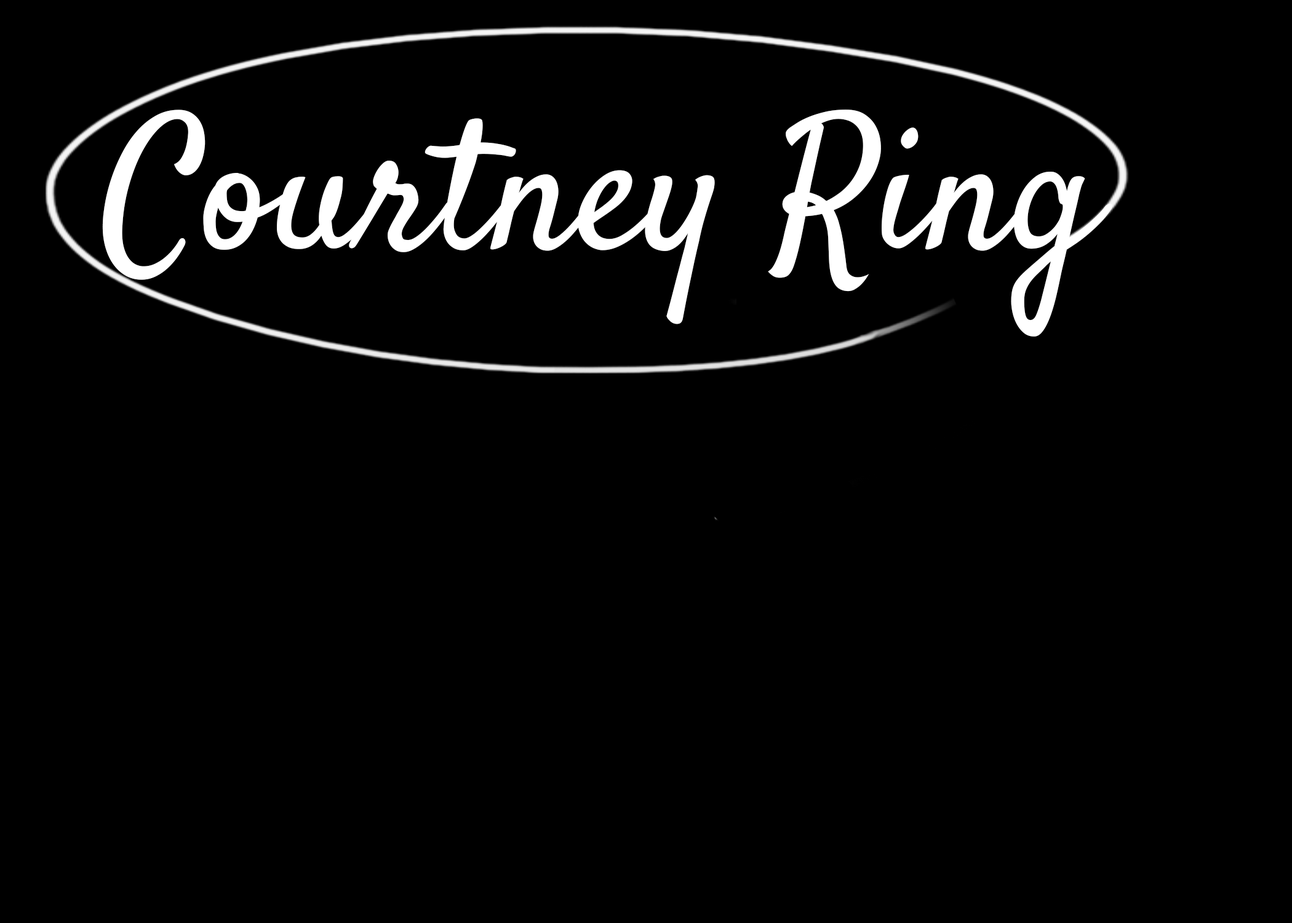
<style>
.page{position:relative;width:1292px;height:923px;background:#000000}
.page>*{position:absolute;margin:0}
.t1{font:184.6px "Satisfy";color:#ffffff}
</style>
<div class="page">
<p class="t1" style="left:102px;top:110px;width:1010px;height:227px">Courtney Ring</p>
</div>
